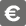
<style>
.page{position:relative;width:26px;height:26px;background:#6c6c6b}
.page>*{position:absolute;margin:0}
.t1{font:22.9px "ProximaNova-Bold";color:#ffffff}
</style>
<div class="page">
<p class="t1" style="left:4px;top:5px;width:16px;height:17px">€</p>
</div>
